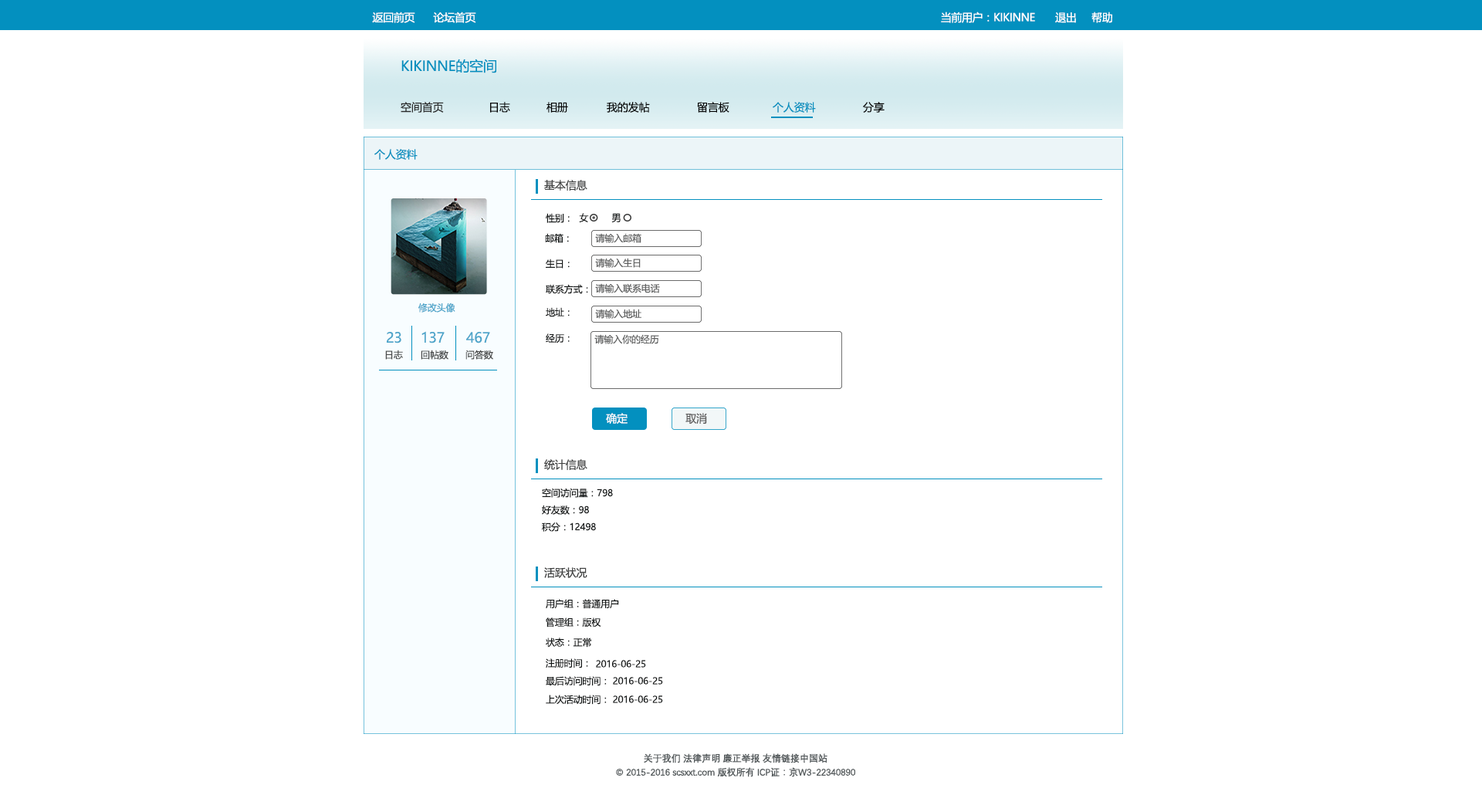
<style>
.page{position:relative;width:1482px;height:805px;background:#ffffff}
.page>*{position:absolute;margin:0}
.t1{font:10.8px "MicrosoftYaHei";letter-spacing:-0.025em;color:#ffffff}
.t2{font:13.9px "MicrosoftYaHei";letter-spacing:-0.01em;color:#0390bf}
.t3{font:10.8px "MicrosoftYaHei";letter-spacing:-0.01em;color:#292a2a}
.t4{font:10.8px "MicrosoftYaHei";letter-spacing:-0.01em;color:#040404}
.t5{font:10.8px "MicrosoftYaHei";letter-spacing:-0.01em;color:#0390bf}
.t6{font:10.8px "MicrosoftYaHei";letter-spacing:-0.01em;color:#404141}
.t7{font:9.3px "MicrosoftYaHei";letter-spacing:-0.01em;color:#131616}
.t8{font:9.3px "MicrosoftYaHei";letter-spacing:-0.01em;color:#5f6060}
.t9{font:9.3px "MicrosoftYaHei";letter-spacing:-0.01em;color:#4ea5ca}
.t10{font:13.9px "MicrosoftYaHei";letter-spacing:-0.01em;color:#4ea5ca}
.t11{font:9.3px "MicrosoftYaHei";letter-spacing:-0.01em;color:#454646}
.t12{font:10.8px "MicrosoftYaHei";letter-spacing:-0.01em;color:#ffffff}
.t13{font:10.8px "MicrosoftYaHei";letter-spacing:-0.01em;color:#5e5d5d}
.t14{font:9.3px/13.9px "DengXian-Regular";letter-spacing:-0.025em;color:#545a5c;font-weight:bold}
</style>
<div class="page">
<p class="t1" style="left:372px;top:12px;width:43px;height:11px">返回前页</p>
<p class="t1" style="left:433px;top:12px;width:43px;height:11px">论坛首页</p>
<p class="t1" style="left:941px;top:12px;width:94px;height:11px">当前用户：KIKINNE</p>
<p class="t1" style="left:1055px;top:12px;width:21px;height:11px">退出</p>
<p class="t1" style="left:1091px;top:12px;width:21px;height:11px">帮助</p>
<p class="t2" style="left:401px;top:59px;width:95px;height:14px">KIKINNE的空间</p>
<p class="t3" style="left:400px;top:102px;width:44px;height:11px">空间首页</p>
<p class="t4" style="left:490px;top:102px;width:20px;height:11px">日志</p>
<p class="t4" style="left:546px;top:102px;width:22px;height:11px">相册</p>
<p class="t4" style="left:607px;top:102px;width:43px;height:11px">我的发帖</p>
<p class="t4" style="left:697px;top:102px;width:32px;height:11px">留言板</p>
<p class="t5" style="left:772px;top:102px;width:44px;height:11px">个人资料</p>
<p class="t4" style="left:863px;top:102px;width:21px;height:11px">分享</p>
<p class="t5" style="left:374px;top:149px;width:43px;height:11px">个人资料</p>
<p class="t6" style="left:544px;top:180px;width:43px;height:11px">基本信息</p>
<p class="t7" style="left:546px;top:213px;width:23px;height:10px">性别：</p>
<p class="t7" style="left:579px;top:213px;width:10px;height:9px">女</p>
<p class="t7" style="left:611px;top:213px;width:9px;height:10px">男</p>
<p class="t7" style="left:545px;top:233px;width:24px;height:10px">邮箱：</p>
<p class="t8" style="left:595px;top:233px;width:46px;height:10px">请输入邮箱</p>
<p class="t8" style="left:595px;top:258px;width:45px;height:10px">请输入生日</p>
<p class="t7" style="left:546px;top:259px;width:23px;height:10px">生日：</p>
<p class="t7" style="left:546px;top:284px;width:42px;height:10px">联系方式：</p>
<p class="t8" style="left:595px;top:283px;width:65px;height:10px">请输入联系电话</p>
<p class="t9" style="left:418px;top:302px;width:37px;height:11px">修改头像</p>
<p class="t7" style="left:546px;top:307px;width:23px;height:10px">地址：</p>
<p class="t8" style="left:595px;top:309px;width:46px;height:10px">请输入地址</p>
<p class="t10" style="left:387px;top:332px;width:14px;height:11px">23</p>
<p class="t10" style="left:421px;top:331px;width:23px;height:12px">137</p>
<p class="t10" style="left:466px;top:332px;width:24px;height:11px">467</p>
<p class="t7" style="left:546px;top:333px;width:23px;height:10px">经历：</p>
<p class="t8" style="left:594px;top:334px;width:65px;height:10px">请输入你的经历</p>
<p class="t11" style="left:385px;top:350px;width:18px;height:10px">日志</p>
<p class="t11" style="left:421px;top:350px;width:27px;height:10px">回帖数</p>
<p class="t11" style="left:465px;top:350px;width:28px;height:10px">问答数</p>
<p class="t12" style="left:606px;top:413px;width:21px;height:11px">确定</p>
<p class="t13" style="left:685px;top:413px;width:22px;height:11px">取消</p>
<p class="t6" style="left:544px;top:459px;width:43px;height:11px">统计信息</p>
<p class="t7" style="left:542px;top:488px;width:71px;height:10px">空间访问量：798</p>
<p class="t7" style="left:542px;top:505px;width:47px;height:10px">好友数：98</p>
<p class="t7" style="left:542px;top:522px;width:54px;height:10px">积分：12498</p>
<p class="t6" style="left:544px;top:567px;width:43px;height:11px">活跃状况</p>
<p class="t7" style="left:546px;top:599px;width:73px;height:10px">用户组：普通用户</p>
<p class="t7" style="left:546px;top:617px;width:55px;height:10px">管理组：版权</p>
<p class="t7" style="left:546px;top:637px;width:45px;height:10px">状态：正常</p>
<p class="t7" style="left:546px;top:658px;width:42px;height:10px">注册时间：</p>
<p class="t7" style="left:596px;top:660px;width:50px;height:7px">2016-06-25</p>
<p class="t7" style="left:546px;top:676px;width:61px;height:10px">最后访问时间：</p>
<p class="t7" style="left:613px;top:677px;width:50px;height:7px">2016-06-25</p>
<p class="t7" style="left:546px;top:694px;width:61px;height:11px">上次活动时间：</p>
<p class="t7" style="left:613px;top:695px;width:50px;height:8px">2016-06-25</p>
<p class="t14" style="left:616px;top:753px;width:239px;height:24px;text-align:center">关于我们 法律声明 廉正举报 友情链接中国站<br>© 2015-2016 scsxxt.com 版权所有 ICP证：京W3-22340890</p>
</div>
